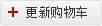
<style>
.page{position:relative;width:102px;height:26px}
.page>*{position:absolute;margin:0}
.t1{font:12px "NSimSun";letter-spacing:0.05em;color:#333333}
.t2{font:18px "ArialMT";letter-spacing:0.05em;color:#bb0202}
</style>
<div class="page">
<p class="t1" style="left:26px;top:6px;width:61px;height:12px">更新购物车</p>
<p class="t2" style="left:8px;top:7px;width:10px;height:10px">+</p>
</div>
